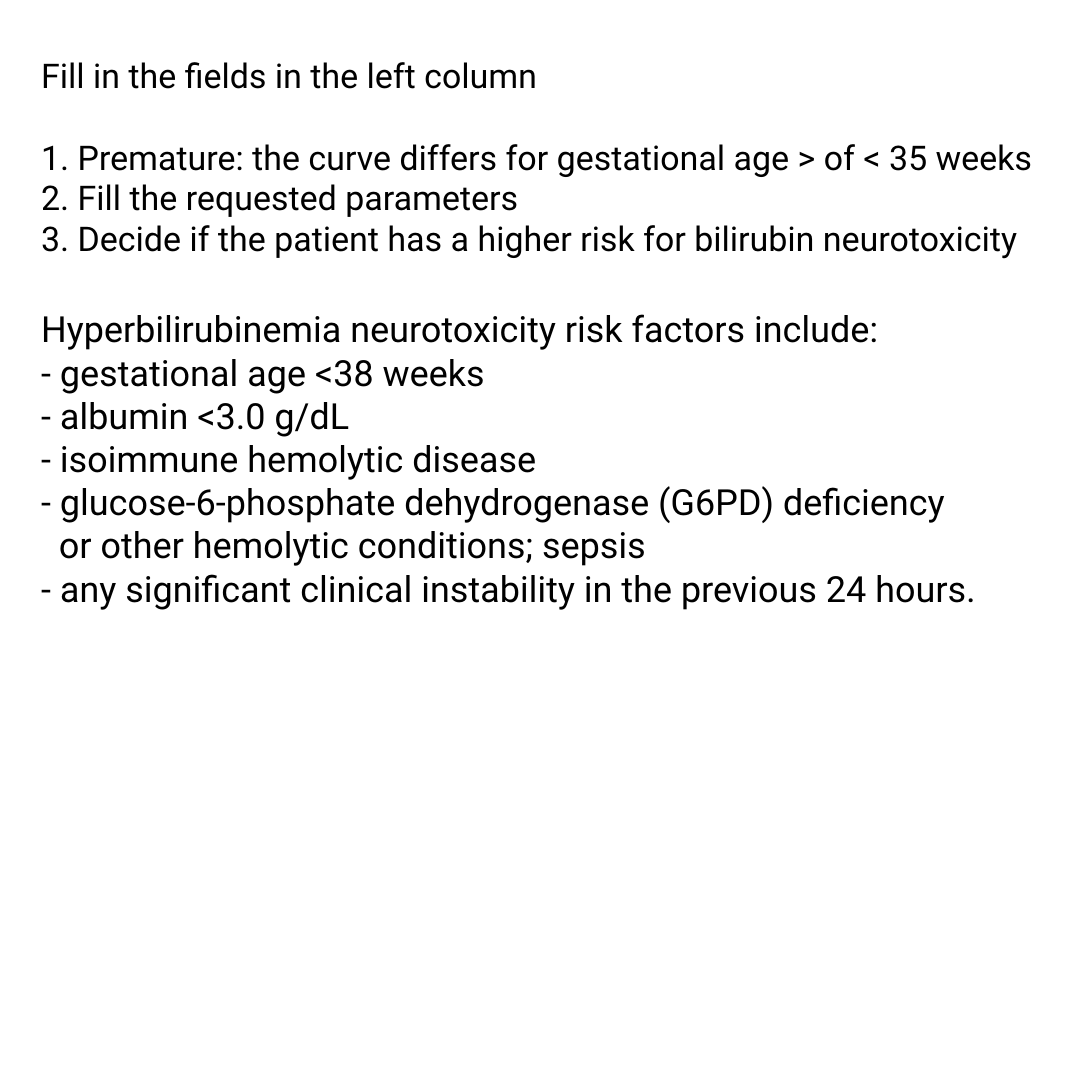
<style>
.page{position:relative;width:1080px;height:1080px;background:#ffffff}
.page>*{position:absolute;margin:0}
.t1{font:36px "Roboto-Regular";color:#000000}
.t2{font:34px "Roboto-Regular";color:#000000}
</style>
<div class="page">
<p class="t1" style="left:41px;top:62px;width:990px;height:548px"><span class="t2">Fill in the fields in the left column<br><br>1. Premature: the curve differs for gestational age &gt; of &lt; 35 weeks<br>2. Fill the requested parameters<br>3. Decide if the patient has a higher risk for bilirubin neurotoxicity<br><br></span>Hyperbilirubinemia neurotoxicity risk factors include:<br>- gestational age &lt;38 weeks<br>- albumin &lt;3.0 g/dL<br>- isoimmune hemolytic disease<br>- glucose-6-phosphate dehydrogenase (G6PD) deficiency<br>  or other hemolytic conditions; sepsis<br>- any significant clinical instability in the previous 24 hours.</p>
</div>
